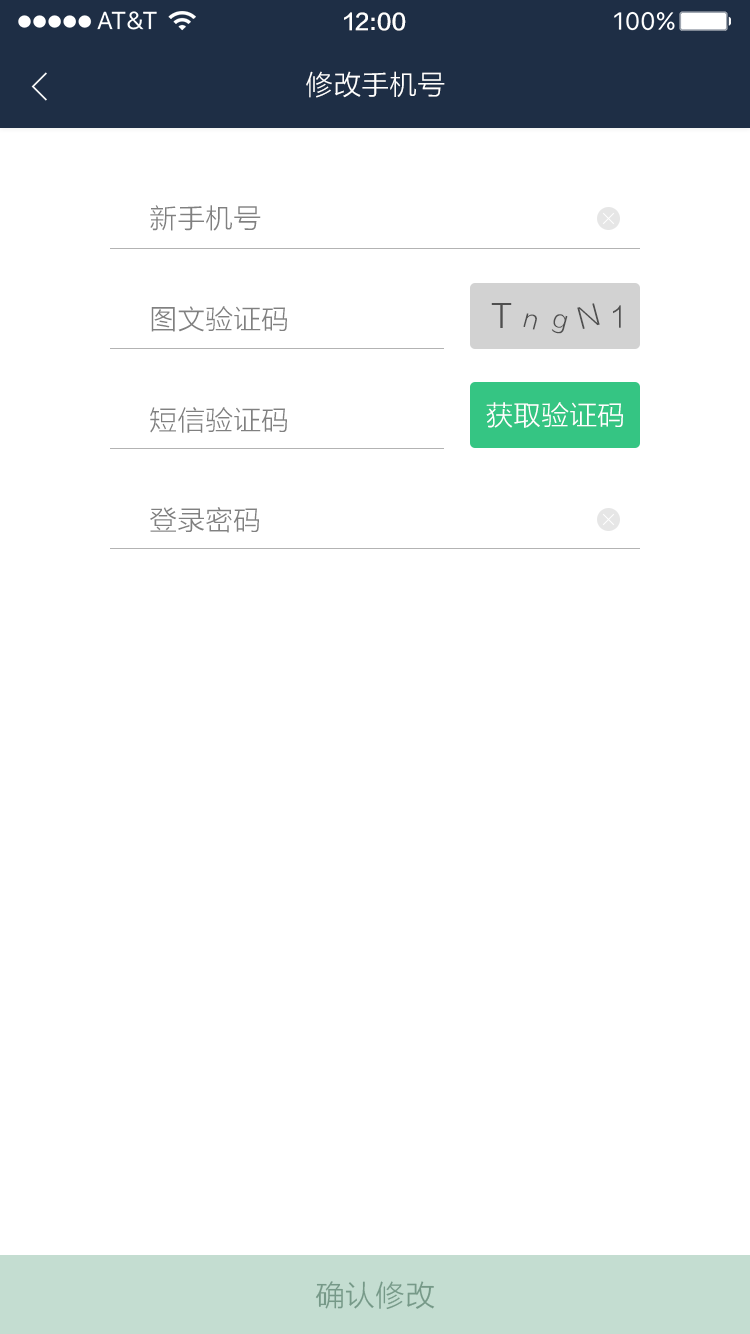
<style>
.page{position:relative;width:750px;height:1334px;background:#ffffff}
.page>*{position:absolute;margin:0}
.t1{font:22px "FZLTZHK--GBK1-0";color:#ffffff}
.t2{font:28px "FZLTXHK";color:#ffffff}
.t3{font:28px "FZLTXHK";color:#808080}
.t4{font:32.8px "FZLTXHK";color:#4f4f4f}
.t5{font:28.9px "FZLTXHK";color:#4f4f4f}
.t6{font:25.3px "FZLTXHK";color:#4f4f4f}
.t7{font:30px "FZLTXHK";color:#769988}
</style>
<div class="page">
<p class="t1" style="left:344px;top:12px;width:62px;height:19px">12:00</p>
<p class="t2" style="left:306px;top:71px;width:139px;height:27px">修改手机号</p>
<p class="t3" style="left:150px;top:205px;width:111px;height:26px">新手机号</p>
<p class="t4" style="left:491px;top:303px;width:21px;height:25px">T</p>
<p class="t5" style="left:577px;top:303px;width:23px;height:26px;rotate:-15deg">N</p>
<p class="t5" style="left:613px;top:305px;width:8px;height:23px">1</p>
<p class="t3" style="left:151px;top:306px;width:136px;height:26px">图文验证码</p>
<p class="t6" style="left:523px;top:313px;width:14px;height:17px;rotate:15deg">n</p>
<p class="t6" style="left:551px;top:314px;width:17px;height:20px;rotate:15deg">g</p>
<p class="t3" style="left:150px;top:407px;width:137px;height:26px">短信验证码</p>
<p class="t2" style="left:486px;top:402px;width:137px;height:26px">获取验证码</p>
<p class="t3" style="left:150px;top:507px;width:109px;height:26px">登录密码</p>
<p class="t7" style="left:315px;top:1281px;width:120px;height:29px">确认修改</p>
</div>
